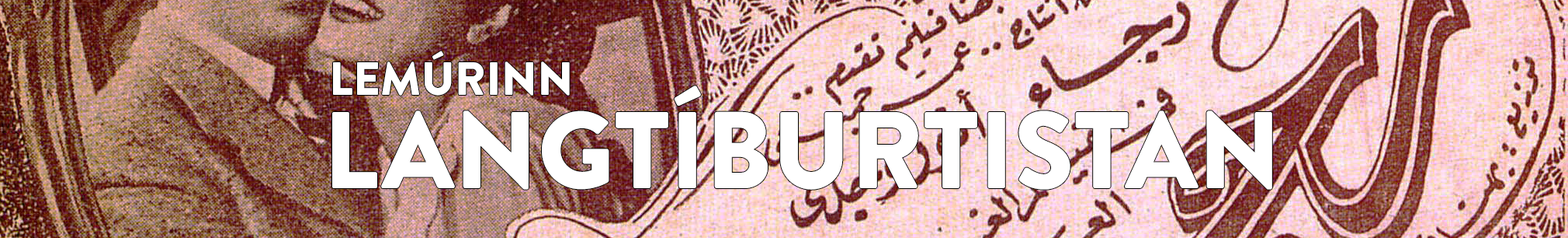
<style>
.page{position:relative;width:1568px;height:238px}
.page>*{position:absolute;margin:0}
.t1{font:46.6px "BrandonGrotesque-Black";color:#ffffff}
.t2{font:108.7px "BrandonGrotesque-Black";color:#ffffff}
</style>
<div class="page">
<p class="t1" style="left:333px;top:50px;width:237px;height:45px">LEMÚRINN</p>
<p class="t2" style="left:332px;top:85px;width:940px;height:104px">LANGTÍBURTISTAN</p>
</div>
